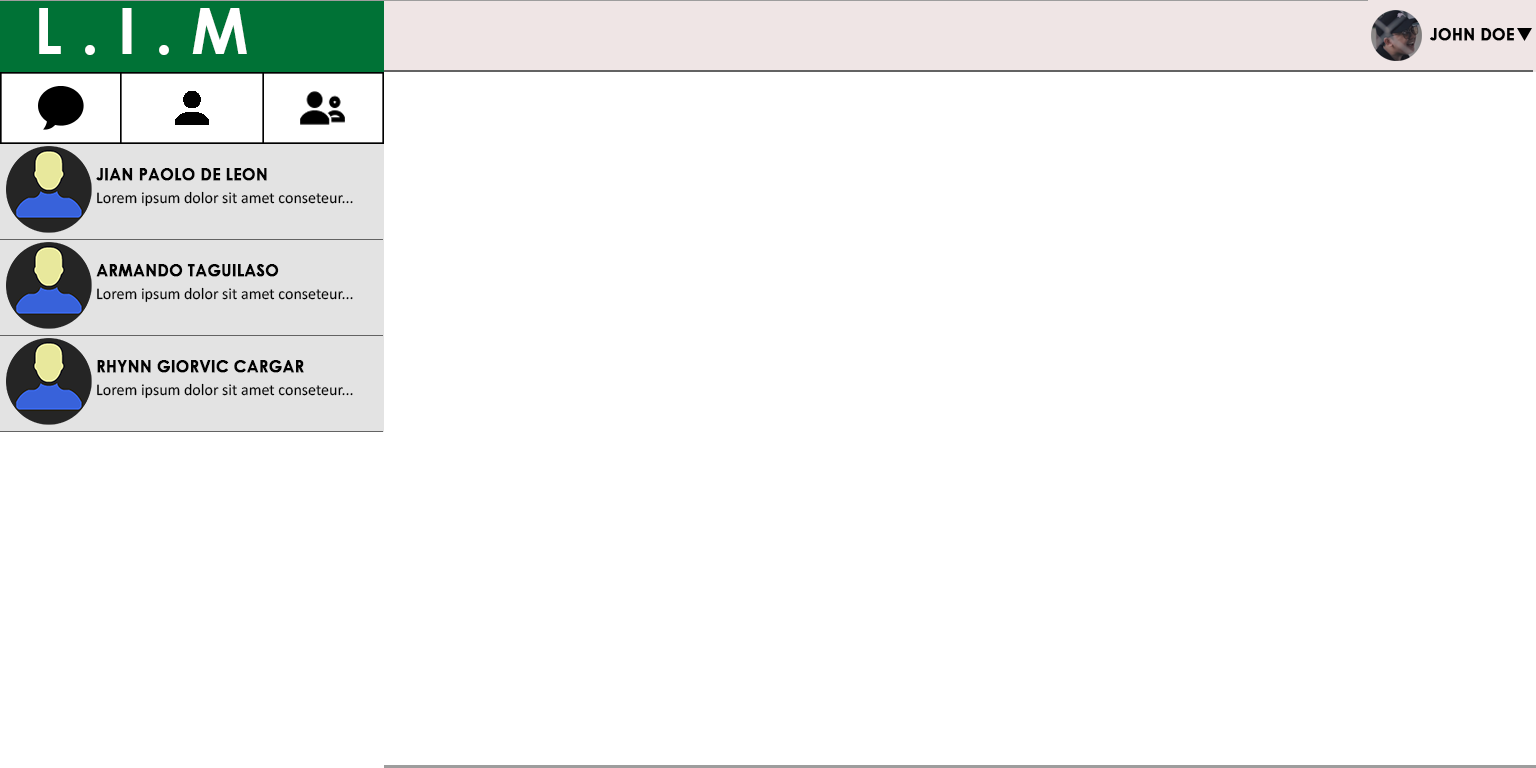
<style>
.page{position:relative;width:1536px;height:768px;background:#ffffff}
.page>*{position:absolute;margin:0}
.t1{font:64px "CenturyGothic-Bold";letter-spacing:0.295em;color:#ffffff;text-transform:uppercase}
.t2{font:16px "CenturyGothic-Bold";color:#010101;text-transform:uppercase;font-weight:bold}
.t3{font:16.2px "CenturyGothic-Bold";color:#020202;text-transform:uppercase;font-weight:bold}
.t4{font:16.2px "Calibri";color:#020202}
</style>
<div class="page">
<p class="t1" style="left:39px;top:8px;width:208px;height:47px">L.I.M</p>
<p class="t2" style="left:1430px;top:28px;width:84px;height:13px">john doe</p>
<p class="t3" style="left:96px;top:168px;width:171px;height:13px">Jian Paolo de Leon</p>
<p class="t4" style="left:97px;top:191px;width:256px;height:16px">Lorem ipsum dolor sit amet conseteur...</p>
<p class="t3" style="left:96px;top:264px;width:183px;height:13px">ARMANDO TAGUILASO</p>
<p class="t4" style="left:97px;top:287px;width:256px;height:16px">Lorem ipsum dolor sit amet conseteur...</p>
<p class="t3" style="left:97px;top:360px;width:207px;height:13px">RHYNN GIORVIC CARGAR</p>
<p class="t4" style="left:97px;top:383px;width:256px;height:16px">Lorem ipsum dolor sit amet conseteur...</p>
</div>
